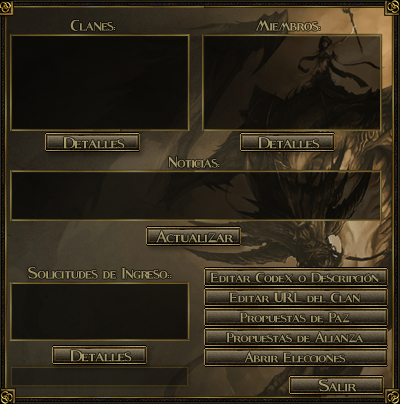
<style>
.page{position:relative;width:400px;height:404px}
.page>*{position:absolute;margin:0}
.t1{font:28.9px "Fleet-Street";color:#9b8f62;scale:0.94 1}
.t2{font:28.9px "Fleet-Street";color:#a79868;scale:0.94 1}
.t3{font:30px "Fleet-Street";color:#a19365}
.t4{font:28.9px "Fleet-Street";color:#a59767;scale:0.94 1}
.t5{font:30px "Fleet-Street";color:#a19465}
.t6{font:28.9px "Fleet-Street";color:#a49768;scale:0.94 1}
.t7{font:26px "Fleet-Street";color:#a19366}
.t8{font:26px "Fleet-Street";color:#a29466}
.t9{font:26px "Fleet-Street";color:#a19365}
.t10{font:26px "Fleet-Street";color:#a19466}
.t11{font:30px "Fleet-Street";color:#a29466}
</style>
<div class="page">
<p class="t1" style="left:70px;top:19px;width:46px;height:12px">Clanes:</p>
<p class="t2" style="left:256px;top:19px;width:64px;height:12px">Miembros:</p>
<p class="t3" style="left:63px;top:137px;width:62px;height:12px">Detalles</p>
<p class="t3" style="left:258px;top:137px;width:62px;height:12px">Detalles</p>
<p class="t4" style="left:168px;top:156px;width:52px;height:12px">Noticias:</p>
<p class="t5" style="left:155px;top:230px;width:79px;height:13px">Actualizar</p>
<p class="t6" style="left:28px;top:267px;width:144px;height:12px">Solicitudes de Ingreso::</p>
<p class="t7" style="left:210px;top:272px;width:169px;height:11px">Editar Codex o Descripción</p>
<p class="t8" style="left:229px;top:292px;width:131px;height:11px">Editar URL del Clan</p>
<p class="t9" style="left:240px;top:312px;width:110px;height:11px">Propuestas de Paz</p>
<p class="t9" style="left:226px;top:331px;width:137px;height:12px">Propuestas de Alianza</p>
<p class="t3" style="left:70px;top:350px;width:62px;height:12px">Detalles</p>
<p class="t10" style="left:244px;top:351px;width:102px;height:12px">Abrir Elecciones</p>
<p class="t11" style="left:318px;top:379px;width:39px;height:13px">Salir</p>
</div>
